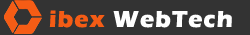
<style>
.page{position:relative;width:250px;height:35px;background:#333333}
.page>*{position:absolute;margin:0}
.t1{font:24px "ErasITC-Bold";letter-spacing:0.043em;color:#ffffff}
.t2{font:24px "ErasITC-Bold";letter-spacing:0.043em;color:#f55c15}
</style>
<div class="page">
<p class="t1" style="left:49px;top:10px;width:183px;height:18px"><span class="t2">ibex</span> WebTech</p>
</div>
